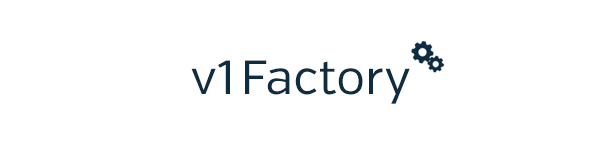
<style>
.page{position:relative;width:600px;height:150px;background:#ffffff}
.page>*{position:absolute;margin:0}
.t1{font:48px "VerbRegular";color:#0f2d40}
</style>
<div class="page">
<p class="t1" style="left:191px;top:60px;width:219px;height:44px">v1Factory</p>
</div>
